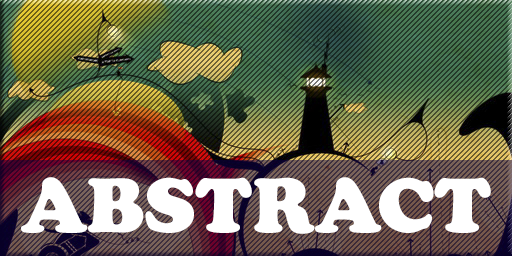
<style>
.page{position:relative;width:512px;height:256px}
.page>*{position:absolute;margin:0}
.t1{font:80px "CooperBlack";color:#ffffff}
</style>
<div class="page">
<p class="t1" style="left:21px;top:177px;width:470px;height:57px">ABSTRACT</p>
</div>
